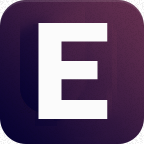
<style>
.page{position:relative;width:144px;height:144px;background:#fbfbfb}
.page>*{position:absolute;margin:0}
.t1{font:144px "FranklinGothic-Demi";color:#fbfbfb}
</style>
<div class="page">
<p class="t1" style="left:38px;top:23px;width:70px;height:96px">E</p>
</div>
